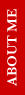
<style>
.page{position:relative;width:25px;height:95px;background:#cc0000}
.page>*{position:absolute;margin:0}
.t1{font:14px "Baskerville-SemiBold";color:#ffffff}
</style>
<div class="page">
<p class="t1" style="left:7px;top:9px;width:10px;height:77px;rotate:-90deg">ABOUT ME</p>
</div>
